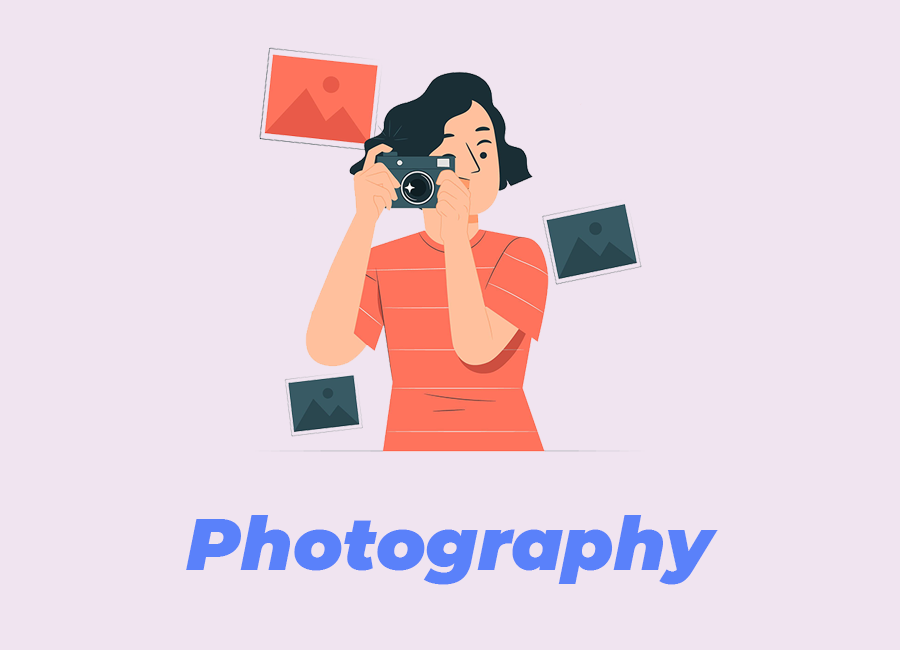
<style>
.page{position:relative;width:900px;height:650px;background:#f0e4f0}
.page>*{position:absolute;margin:0}
.t1{font:73.6px "Montserrat-BlackItalic";color:#5a81fa}
</style>
<div class="page">
<p class="t1" style="left:186px;top:515px;width:532px;height:70px">Photography</p>
</div>
